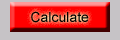
<style>
.page{position:relative;width:120px;height:40px;background:#c6c3c6}
.page>*{position:absolute;margin:0}
.t1{font:14px "ArialMT";color:#000000}
</style>
<div class="page">
<p class="t1" style="left:31px;top:11px;width:58px;height:12px">Calculate</p>
</div>
